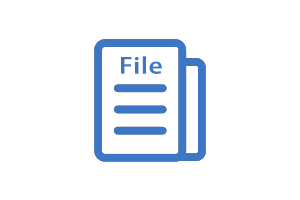
<style>
.page{position:relative;width:300px;height:200px;background:#ffffff}
.page>*{position:absolute;margin:0}
.t1{font:21.1px "AdobeHeitiStd-Regular";letter-spacing:0.01em;color:#3d76c4;font-weight:bold;scale:1.2 1}
</style>
<div class="page">
<p class="t1" style="left:121px;top:56px;width:41px;height:18px">File</p>
</div>
